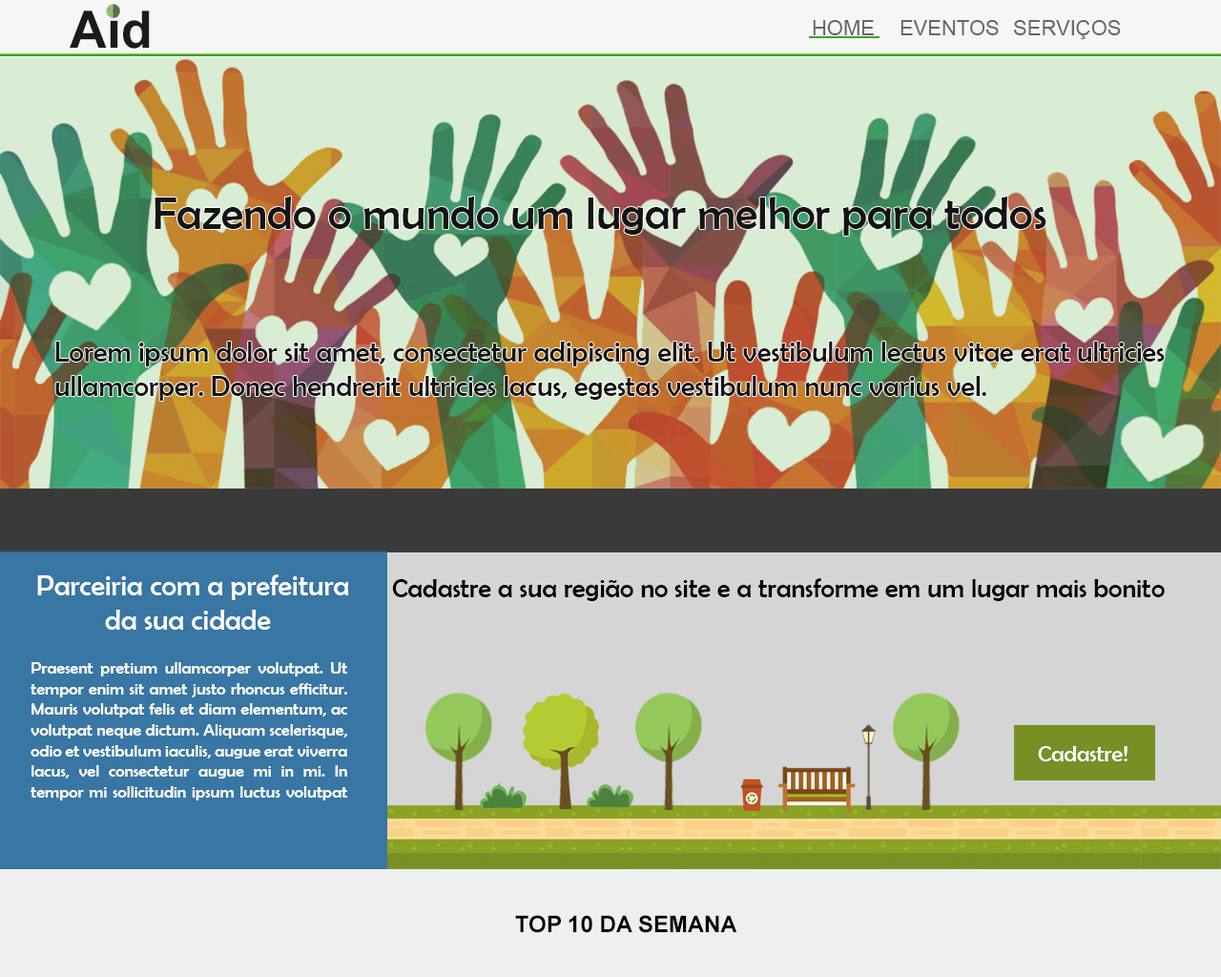
<style>
.page{position:relative;width:1221px;height:977px}
.page>*{position:absolute;margin:0}
.t1{font:51.5px "Arial-BoldMT";color:#1b1b1b}
.t2{font:21px "ArialMT";color:#666666}
.t3{font:45.8px "BerlinSansFB-Reg";color:#151414}
.t4{font:28.6px "BerlinSansFB-Reg";color:#151414}
.t5{font:28.6px "BerlinSansFB-Reg";color:#ffffff}
.t6{font:26.7px "BerlinSansFB-Reg";color:#000000}
.t7{font:17.2px "BerlinSansFB-Reg";color:#ffffff}
.t8{font:22.9px "BerlinSansFB-Reg";color:#ffffff}
.t9{font:22.9px "Arial-BoldMT";color:#000000}
</style>
<div class="page">
<p class="t1" style="left:70px;top:10px;width:80px;height:39px">Aid</p>
<p class="t2" style="left:813px;top:20px;width:61px;height:15px">HOME</p>
<p class="t2" style="left:900px;top:20px;width:99px;height:15px">EVENTOS</p>
<p class="t2" style="left:1013px;top:20px;width:108px;height:19px">SERVIÇOS</p>
<p class="t3" style="left:155px;top:196px;width:891px;height:40px">Fazendo o mundo um lugar melhor para todos</p>
<p class="t4" style="left:55px;top:341px;width:1110px;height:60px">Lorem ipsum dolor sit amet, consectetur adipiscing elit. Ut vestibulum lectus vitae erat ultricies ullamcorper. Donec hendrerit ultricies lacus, egestas vestibulum nunc varius vel.</p>
<p class="t5" style="left:37px;top:574px;width:312px;height:56px">Parceiria com a prefeitura <br>  da sua cidade</p>
<p class="t6" style="left:392px;top:578px;width:773px;height:23px">Cadastre a sua região no site e a transforme em um lugar mais bonito</p>
<p class="t7" style="left:31px;top:662px;width:317px;height:138px;text-align:justify">Praesent pretium ullamcorper volutpat. Ut tempor enim sit amet justo rhoncus efficitur. Mauris volutpat felis et diam elementum, ac volutpat neque dictum. Aliquam scelerisque, odio et vestibulum iaculis, augue erat viverra lacus, vel consectetur augue mi in mi. In tempor mi sollicitudin ipsum luctus volutpat</p>
<p class="t8" style="left:1038px;top:746px;width:89px;height:15px">Cadastre!</p>
<p class="t9" style="left:515px;top:915px;width:222px;height:18px">TOP 10 DA SEMANA</p>
</div>
